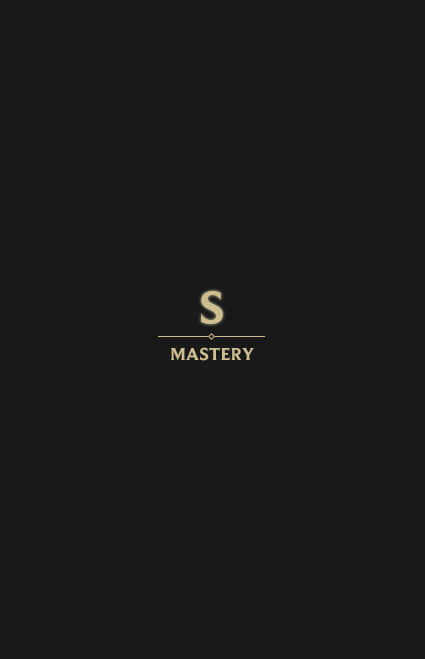
<style>
.page{position:relative;width:425px;height:659px;background:#191919}
.page>*{position:absolute;margin:0}
.t1{font:48px "BeaufortforLOL-Bold";color:#cdbe91}
.t2{font:18px "BeaufortforLOL-Bold";color:#cdbe91}
</style>
<div class="page">
<p class="t1" style="left:201px;top:291px;width:22px;height:33px">S</p>
<p class="t2" style="left:170px;top:347px;width:84px;height:14px">MASTERY</p>
</div>
